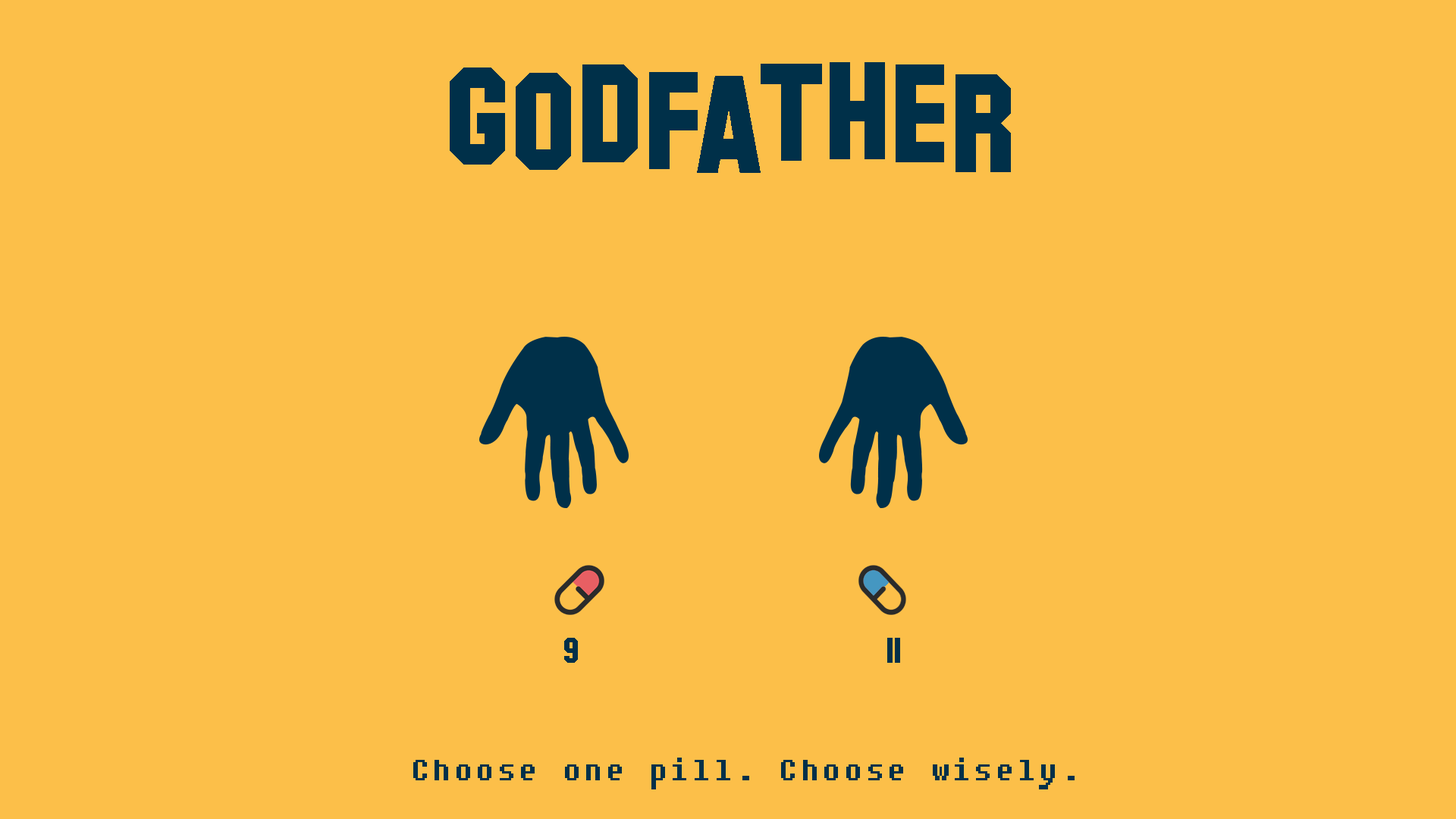
<style>
.page{position:relative;width:1456px;height:819px;background:#fcbf49}
.page>*{position:absolute;margin:0}
.t1{font:138.7px "HollywoodHills";color:#003049}
.t2{font:34.7px "HollywoodHills";color:#003049}
.t3{font:34.7px "Fixedsys";color:#003049}
</style>
<div class="page">
<p class="t1" style="left:450px;top:62px;width:561px;height:111px">godfather</p>
<p class="t2" style="left:564px;top:638px;width:14px;height:25px">9</p>
<p class="t2" style="left:887px;top:638px;width:13px;height:25px">11</p>
<p class="t3" style="left:413px;top:758px;width:662px;height:31px">Choose one pill. Choose wisely.</p>
</div>
